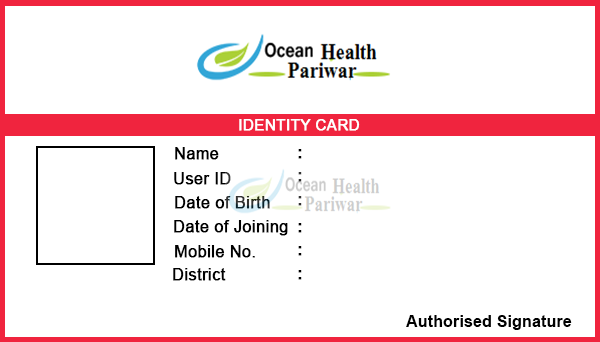
<style>
.page{position:relative;width:600px;height:342px;background:#ffffff}
.page>*{position:absolute;margin:0}
.t1{font:15px "ArialMT";letter-spacing:0.01em;color:#ffffff;font-weight:bold}
.t2{font:16px "ArialMT";letter-spacing:0.01em;color:#000000;font-weight:bold}
.t3{font:16px "Arial-BoldMT";letter-spacing:0.01em;color:#000000;font-weight:bold}
.t4{font:16px "Arial-BoldMT";letter-spacing:0.01em;color:#333333;font-weight:bold}
.t5{font:16px "ArialMT";letter-spacing:0.01em;font-weight:bold}
.t6{font:16px "Arial-BoldMT";letter-spacing:0.01em;color:#000000}
</style>
<div class="page">
<p class="t1" style="left:239px;top:119px;width:121px;height:12px">IDENTITY CARD</p>
<p class="t2" style="left:175px;top:147px;width:44px;height:13px">Name</p>
<p class="t3" style="left:298px;top:149px;width:4px;height:10px">:</p>
<p class="t2" style="left:174px;top:172px;width:57px;height:13px">User ID</p>
<p class="t4" style="left:298px;top:172px;width:4px;height:10px">:</p>
<p class="t5" style="left:175px;top:196px;width:95px;height:13px">Date of Birth</p>
<p class="t4" style="left:298px;top:196px;width:4px;height:10px">:</p>
<p class="t2" style="left:174px;top:220px;width:114px;height:16px">Date of Joining</p>
<p class="t3" style="left:298px;top:223px;width:4px;height:10px">:</p>
<p class="t2" style="left:175px;top:245px;width:80px;height:13px">Mobile No.</p>
<p class="t3" style="left:298px;top:246px;width:4px;height:10px">:</p>
<p class="t2" style="left:173px;top:268px;width:53px;height:13px">District</p>
<p class="t3" style="left:298px;top:270px;width:4px;height:10px">:</p>
<p class="t6" style="left:406px;top:315px;width:166px;height:15px">Authorised Signature</p>
</div>
